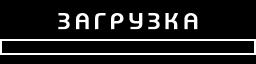
<style>
.page{position:relative;width:256px;height:64px;background:#000000}
.page>*{position:absolute;margin:0}
.t1{font:22.5px "BauhausC-Medium";letter-spacing:0.15em;color:#ffffff;font-weight:bold;scale:1.11 1}
</style>
<div class="page">
<p class="t1" style="left:58px;top:13px;width:140px;height:17px">ЗАГРУЗКА</p>
</div>
